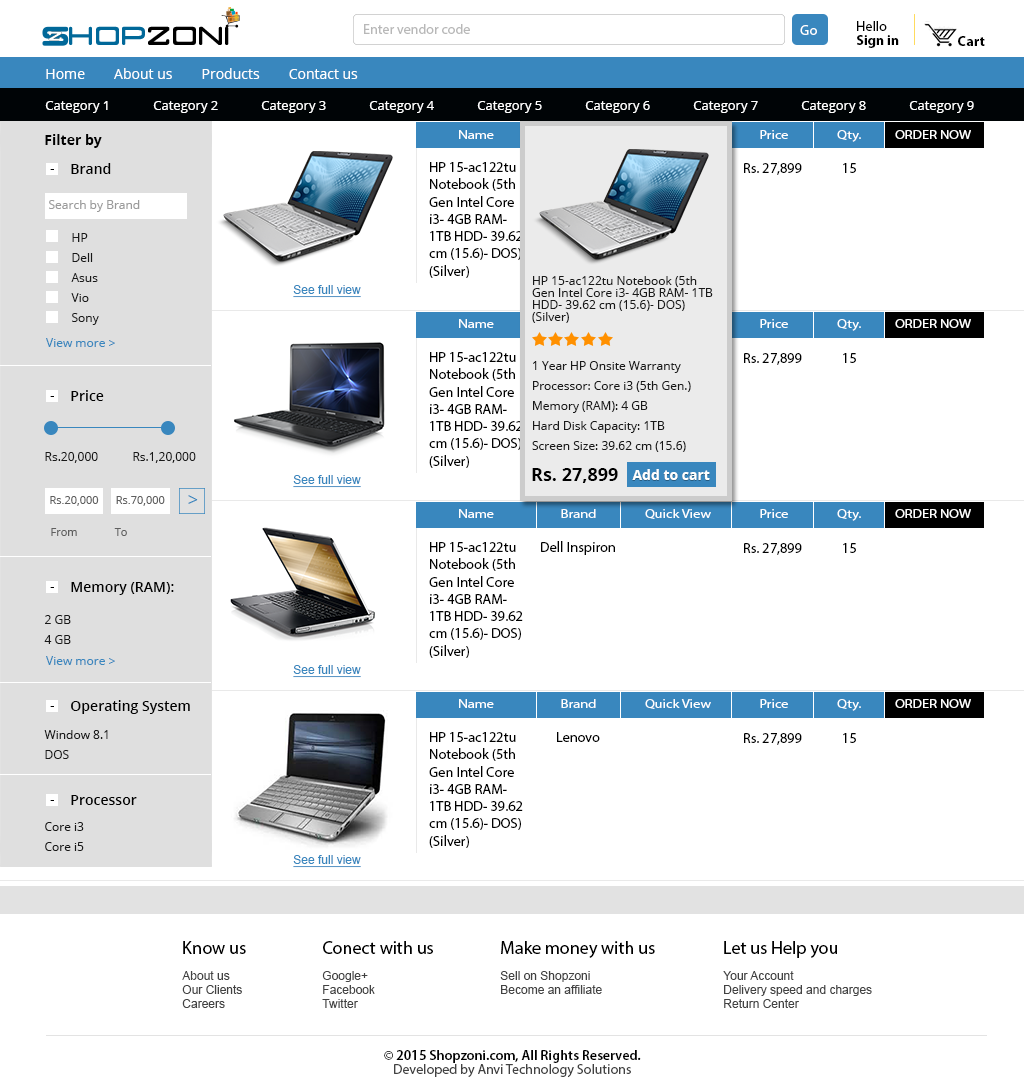
<style>
.page{position:relative;width:1024px;height:1090px;background:#ffffff}
.page>*{position:absolute;margin:0}
.t1{font:14px "MyriadPro-Regular";color:#b8b8b8}
.t2{font:14px "MyriadPro-Regular";color:#ffffff}
.t3{font:14px/6px "MyriadPro-Bold";color:#000000}
.t4{font:14px/6px "MyriadPro-Regular";color:#000000}
.t5{font:14px "MyriadPro-Bold";letter-spacing:0.015em;color:#000000}
.t6{font:14px "OpenSans";color:#ffffff}
.t7{font:13px "OpenSans";color:#ffffff}
.t8{font:14px "OpenSans-Bold";color:#010101}
.t9{font:12px "MyriadPro-Regular";color:#ffffff;scale:1.2 1}
.t10{font:14px "OpenSans";color:#000000}
.t11{font:14px "OpenSans-Semibold";color:#010101}
.t12{font:14.4px "MyriadPro-Regular";color:#000000}
.t13{font:12px "OpenSans";color:#9b9b9b}
.t14{font:12px/12px "OpenSans";color:#191919}
.t15{font:12px "ArialMT";color:#3987be;text-decoration:underline}
.t16{font:12px "OpenSans";color:#3987be}
.t17{font:12px "OpenSans";color:#191919}
.t18{font:18px "OpenSans-Bold";color:#000000}
.t19{font:14px "OpenSans-Bold";color:#ffffff}
.t20{font:11px "OpenSans";color:#5f5f5f}
.t21{font:18px "OpenSans";color:#3987be}
.t22{font:18px "MyriadPro-Regular";color:#000000}
.t23{font:12px/6px "ArialMT";color:#424242}
.t24{font:14px/6px "MyriadPro-Semibold";color:#000000}
.t25{font:14px/6px "MyriadPro-Regular";color:#424242}
</style>
<div class="page">
<p class="t1" style="left:364px;top:24px;width:106px;height:10px">Enter vendor code</p>
<p class="t2" style="left:800px;top:25px;width:17px;height:10px">Go</p>
<p class="t3" style="left:857px;top:21px;width:42px;height:27px"><span class="t4">Hello<br></span>Sign in</p>
<p class="t5" style="left:958px;top:36px;width:27px;height:10px">Cart</p>
<p class="t6" style="left:46px;top:68px;width:312px;height:11px">Home        About us        Products        Contact us</p>
<p class="t7" style="left:45px;top:101px;width:929px;height:12px">Category 1  Category 2  Category 3  Category 4  Category 5  Category 6  Category 7  Category 8  Category 9</p>
<p class="t8" style="left:45px;top:134px;width:57px;height:14px">Filter by</p>
<p class="t9" style="left:459px;top:130px;width:512px;height:12px">Name                      Brand                Quick View                Price                Qty.           ORDER NOW</p>
<p class="t10" style="left:50px;top:169px;width:4px;height:1px">-</p>
<p class="t11" style="left:71px;top:163px;width:40px;height:11px">Brand</p>
<p class="t12" style="left:429px;top:162px;width:94px;height:116px">HP 15-ac122tu Notebook (5th Gen Intel Core i3- 4GB RAM- 1TB HDD- 39.62 cm (15.6)- DOS) (Silver)</p>
<p class="t12" style="left:744px;top:163px;width:58px;height:12px">Rs. 27,899</p>
<p class="t12" style="left:843px;top:163px;width:13px;height:10px">15</p>
<p class="t13" style="left:49px;top:200px;width:91px;height:12px">Search by Brand</p>
<p class="t14" style="left:71px;top:233px;width:28px;height:92px">HP<br>Dell<br>Asus<br>Vio<br>Sony</p>
<p class="t14" style="left:532px;top:276px;width:181px;height:47px">HP 15-ac122tu Notebook (5th Gen Intel Core i3- 4GB RAM- 1TB HDD- 39.62 cm (15.6)- DOS) (Silver)</p>
<p class="t15" style="left:293px;top:285px;width:68px;height:13px">See full view</p>
<p class="t9" style="left:459px;top:319px;width:512px;height:12px">Name                      Brand                Quick View                Price                Qty.           ORDER NOW</p>
<p class="t16" style="left:46px;top:338px;width:69px;height:9px">View more &gt;</p>
<p class="t12" style="left:429px;top:352px;width:94px;height:116px">HP 15-ac122tu Notebook (5th Gen Intel Core i3- 4GB RAM- 1TB HDD- 39.62 cm (15.6)- DOS) (Silver)</p>
<p class="t12" style="left:744px;top:353px;width:58px;height:12px">Rs. 27,899</p>
<p class="t12" style="left:843px;top:353px;width:13px;height:10px">15</p>
<p class="t14" style="left:532px;top:361px;width:159px;height:91px">1 Year HP Onsite Warranty<br>Processor: Core i3 (5th Gen.)<br>Memory (RAM): 4 GB<br>Hard Disk Capacity: 1TB<br>Screen Size: 39.62 cm (15.6)</p>
<p class="t11" style="left:71px;top:390px;width:33px;height:11px">Price</p>
<p class="t10" style="left:50px;top:396px;width:4px;height:1px">-</p>
<p class="t17" style="left:45px;top:452px;width:151px;height:11px">Rs.20,000           Rs.1,20,000</p>
<p class="t18" style="left:532px;top:468px;width:86px;height:15px">Rs. 27,899</p>
<p class="t19" style="left:632px;top:469px;width:78px;height:11px">Add to cart</p>
<p class="t15" style="left:293px;top:475px;width:68px;height:13px">See full view</p>
<p class="t20" style="left:50px;top:496px;width:115px;height:10px">Rs.20,000      Rs.70,000</p>
<p class="t21" style="left:188px;top:495px;width:10px;height:9px">&gt;</p>
<p class="t9" style="left:459px;top:509px;width:512px;height:12px">Name                      Brand                Quick View                Price                Qty.           ORDER NOW</p>
<p class="t20" style="left:51px;top:528px;width:76px;height:8px">From             To</p>
<p class="t12" style="left:429px;top:542px;width:94px;height:116px">HP 15-ac122tu Notebook (5th Gen Intel Core i3- 4GB RAM- 1TB HDD- 39.62 cm (15.6)- DOS) (Silver)</p>
<p class="t12" style="left:541px;top:541px;width:74px;height:14px">Dell Inspiron</p>
<p class="t12" style="left:744px;top:543px;width:58px;height:12px">Rs. 27,899</p>
<p class="t12" style="left:843px;top:543px;width:13px;height:10px">15</p>
<p class="t11" style="left:71px;top:582px;width:103px;height:13px">Memory (RAM):</p>
<p class="t10" style="left:50px;top:587px;width:4px;height:1px">-</p>
<p class="t14" style="left:44px;top:615px;width:27px;height:29px">2 GB<br>4 GB</p>
<p class="t16" style="left:46px;top:656px;width:69px;height:9px">View more &gt;</p>
<p class="t15" style="left:293px;top:665px;width:68px;height:13px">See full view</p>
<p class="t11" style="left:71px;top:700px;width:119px;height:14px">Operating System</p>
<p class="t9" style="left:459px;top:699px;width:512px;height:12px">Name                      Brand                Quick View                Price                Qty.           ORDER NOW</p>
<p class="t10" style="left:50px;top:706px;width:4px;height:1px">-</p>
<p class="t14" style="left:44px;top:730px;width:64px;height:29px">Window 8.1<br>DOS</p>
<p class="t12" style="left:429px;top:732px;width:94px;height:116px">HP 15-ac122tu Notebook (5th Gen Intel Core i3- 4GB RAM- 1TB HDD- 39.62 cm (15.6)- DOS) (Silver)</p>
<p class="t12" style="left:557px;top:732px;width:43px;height:10px">Lenovo</p>
<p class="t12" style="left:744px;top:733px;width:58px;height:12px">Rs. 27,899</p>
<p class="t12" style="left:843px;top:733px;width:13px;height:10px">15</p>
<p class="t11" style="left:71px;top:795px;width:66px;height:10px">Processor</p>
<p class="t10" style="left:50px;top:800px;width:4px;height:1px">-</p>
<p class="t14" style="left:45px;top:822px;width:39px;height:29px">Core i3<br>Core i5</p>
<p class="t15" style="left:293px;top:855px;width:68px;height:13px">See full view</p>
<p class="t22" style="left:183px;top:941px;width:63px;height:13px">Know us</p>
<p class="t22" style="left:323px;top:941px;width:110px;height:13px">Conect with us</p>
<p class="t22" style="left:501px;top:941px;width:154px;height:17px">Make money with us</p>
<p class="t22" style="left:724px;top:941px;width:113px;height:17px">Let us Help you</p>
<p class="t23" style="left:182px;top:971px;width:60px;height:37px">About us<br>Our Clients<br>Careers</p>
<p class="t23" style="left:322px;top:971px;width:53px;height:37px">Google+<br>Facebook<br>Twitter</p>
<p class="t23" style="left:500px;top:971px;width:102px;height:23px">Sell on Shopzoni<br>Become an affiliate</p>
<p class="t23" style="left:723px;top:971px;width:149px;height:37px">Your Account<br>Delivery speed and charges<br>Return Center</p>
<p class="t24" style="left:384px;top:1050px;width:257px;height:28px;text-align:center">© 2015 Shopzoni.com, All Rights Reserved.<br><span class="t25">Developed by Anvi Technology Solutions</span></p>
</div>
